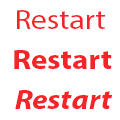
<style>
.page{position:relative;width:120px;height:120px;background:#ffffff}
.page>*{position:absolute;margin:0}
.t1{font:27.9px "MyriadPro-Regular";color:#f42529;scale:1.11 1}
.t2{font:27.9px "MyriadPro-Bold";color:#f42529;scale:1.11 1}
.t3{font:27.9px "MyriadPro-BoldIt";color:#f42529;scale:1.11 1}
</style>
<div class="page">
<p class="t1" style="left:17px;top:10px;width:88px;height:19px">Restart</p>
<p class="t2" style="left:14px;top:50px;width:98px;height:19px">Restart</p>
<p class="t3" style="left:15px;top:90px;width:98px;height:19px">Restart</p>
</div>
